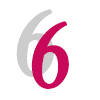
<style>
.page{position:relative;width:100px;height:100px;background:#ffffff}
.page>*{position:absolute;margin:0}
.t1{font:108.7px "Vijaya";letter-spacing:0.2em;color:#cccccc;font-weight:bold}
.t2{font:108.7px "Vijaya";letter-spacing:0.2em;color:#c80859;font-weight:bold}
</style>
<div class="page">
<p class="t1" style="left:16px;top:9px;width:38px;height:68px;rotate:-12deg">6</p>
<p class="t2" style="left:31px;top:21px;width:38px;height:68px;rotate:-12deg">6</p>
</div>
